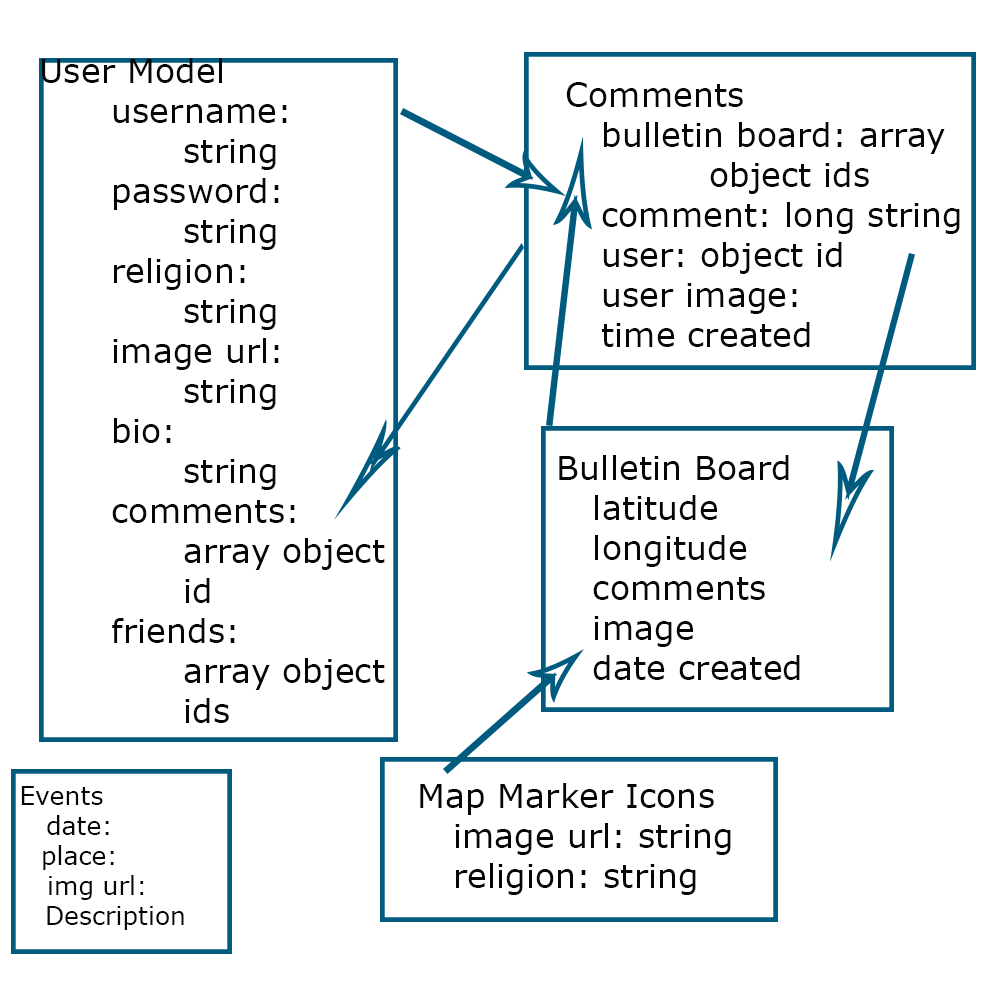
<style>
.page{position:relative;width:1000px;height:1000px;background:#ffffff}
.page>*{position:absolute;margin:0}
.t1{font:33.3px "Verdana";color:#060606}
.t2{font:25px "Verdana";color:#060606}
</style>
<div class="page">
<p class="t1" style="left:41px;top:58px;width:344px;height:665px">User Model<br>  username:  <br>    string<br>  password:<br>    string<br>  religion: <br>    string<br>  image url: <br>    string<br>  bio: <br>    string<br>  comments:<br>    array object      id<br>  friends: <br>    array object      ids</p>
<p class="t1" style="left:566px;top:82px;width:394px;height:265px">Comments<br> bulletin board: array<br>    object ids<br> comment: long string<br> user: object id<br> user image: <br> time created</p>
<p class="t1" style="left:559px;top:455px;width:241px;height:225px">Bulletin Board<br> latitude<br> longitude<br> comments<br> image<br> date created</p>
<p class="t1" style="left:420px;top:783px;width:311px;height:112px">Map Marker Icons<br> image url: string<br> religion: string</p>
<p class="t2" style="left:21px;top:786px;width:163px;height:144px;text-align:center">Events<br> date:<br> place:<br>  img url:<br>   Description</p>
</div>
